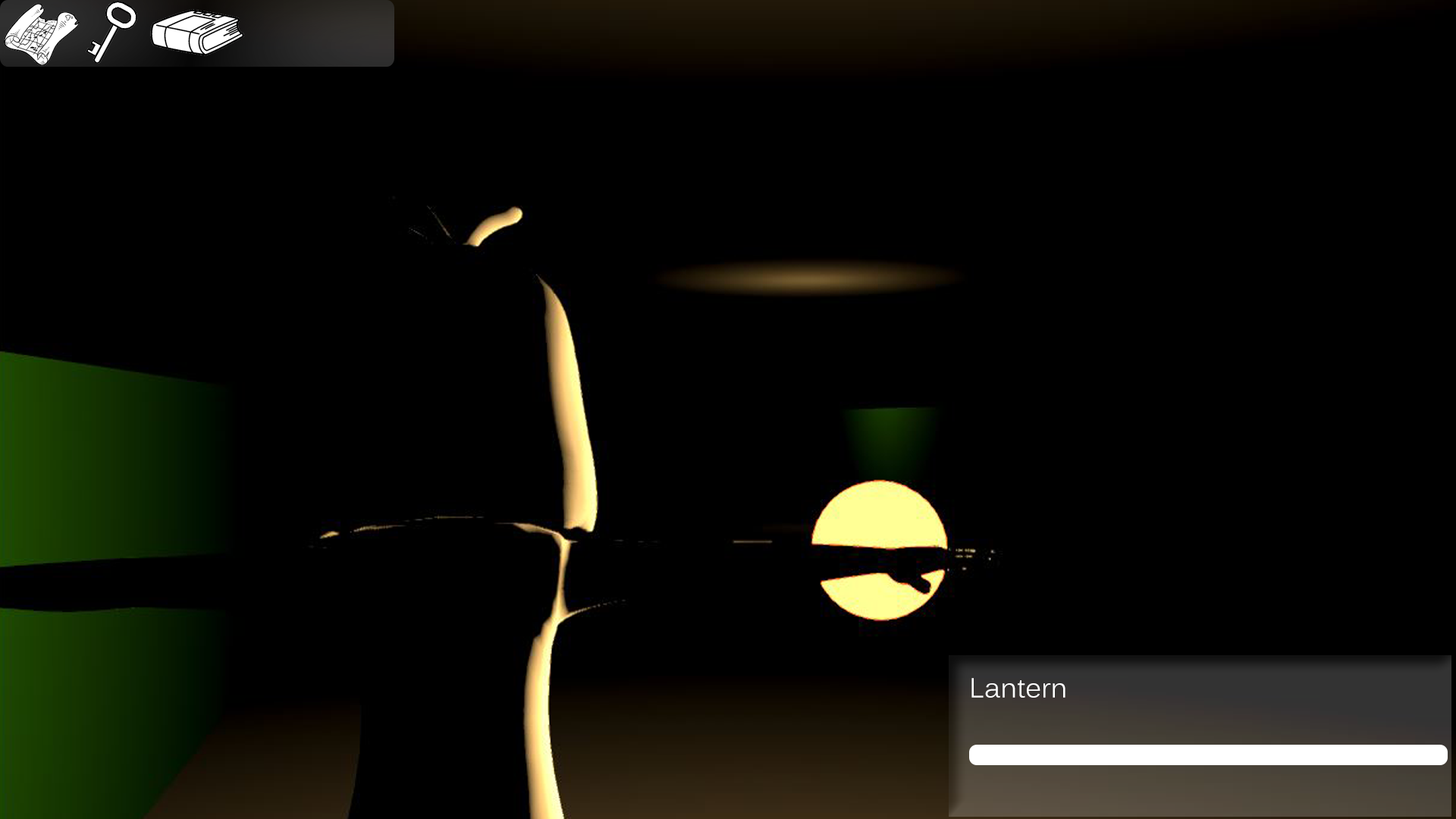
<style>
.page{position:relative;width:1456px;height:819px;background:#000000}
.page>*{position:absolute;margin:0}
.t1{font:27.3px "Kalinga";color:#ffffff}
</style>
<div class="page">
<p class="t1" style="left:971px;top:678px;width:94px;height:20px">Lantern</p>
</div>
